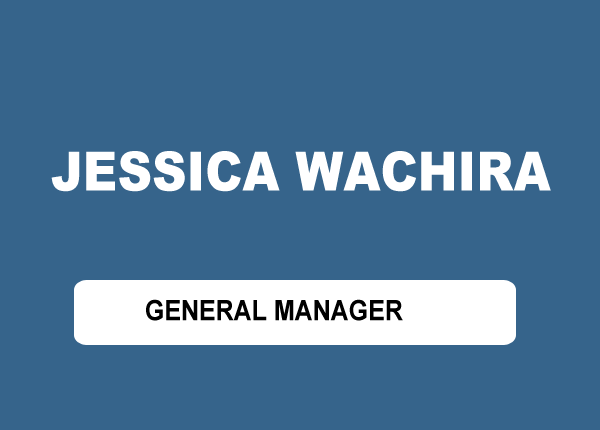
<style>
.page{position:relative;width:600px;height:430px;background:#36648b}
.page>*{position:absolute;margin:0}
.t1{font:54.3px "Arial-Black";color:#ffffff;scale:0.88 1}
.t2{font:42.5px "Arial-Black";color:#ec008c;scale:0.88 1}
.t3{font:28.3px "Arial-BoldMT";color:#000000;scale:0.88 1}
</style>
<div class="page">
<p class="t1" style="left:51px;top:151px;width:500px;height:41px"><span class="t2">    <br><br>  <br></span>  JESSICA WACHIRA</p>
<p class="t3" style="left:146px;top:299px;width:257px;height:22px">GENERAL MANAGER</p>
</div>
